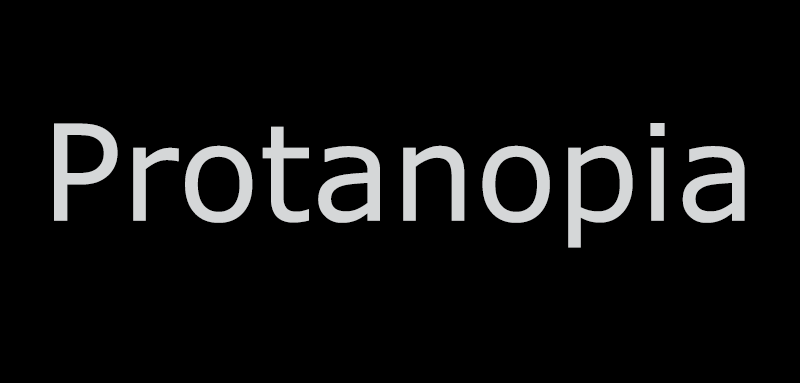
<style>
.page{position:relative;width:800px;height:383px;background:#000000}
.page>*{position:absolute;margin:0}
.t1{font:133.1px "Verdana";color:#d5d7d8}
</style>
<div class="page">
<p class="t1" style="left:54px;top:123px;width:691px;height:125px">Protanopia</p>
</div>
